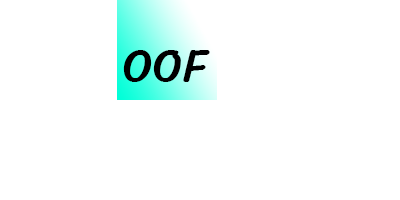
<style>
.page{position:relative;width:400px;height:200px;background:#ffffff}
.page>*{position:absolute;margin:0}
.t1{font:46px "Sriracha-Regular";color:#000000}
</style>
<div class="page">
<p class="t1" style="left:123px;top:50px;width:87px;height:32px">OOF</p>
</div>
